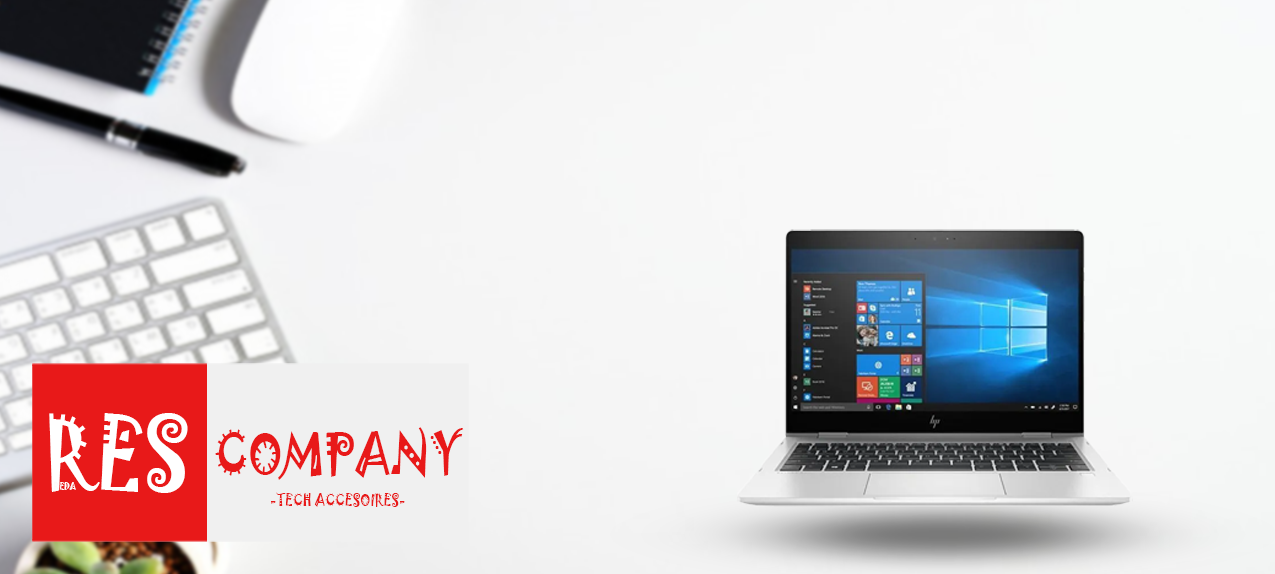
<style>
.page{position:relative;width:1275px;height:574px}
.page>*{position:absolute;margin:0}
.t1{font:89.9px "Jokerman-Regular";color:#ffffff;scale:0.87 1}
.t2{font:51.5px "Jokerman-Regular";color:#e81919;scale:0.87 1}
.t3{font:10.4px "Jokerman-Regular";color:#fef9f9;scale:0.87 1}
.t4{font:8.8px "Jokerman-Regular";color:#ffffff;scale:0.87 1}
.t5{font:15.1px "Jokerman-Regular";color:#e81919;scale:0.87 1}
</style>
<div class="page">
<p class="t1" style="left:49px;top:413px;width:139px;height:80px">RES</p>
<p class="t2" style="left:215px;top:427px;width:249px;height:53px">COMPANY</p>
<p class="t3" style="left:54px;top:481px;width:6px;height:10px">R</p>
<p class="t4" style="left:60px;top:482px;width:16px;height:8px">EDA</p>
<p class="t5" style="left:271px;top:492px;width:134px;height:15px">-TECH ACCESOIRES-</p>
</div>
